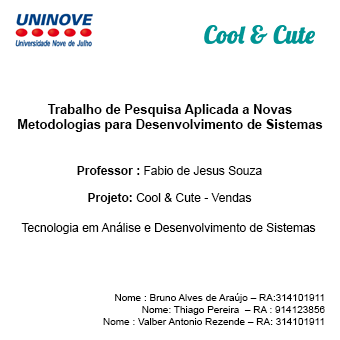
<style>
.page{position:relative;width:340px;height:340px;background:#ffffff}
.page>*{position:absolute;margin:0}
.t1{font:13px "Arial-BoldMT";color:#000000}
.t2{font:12px "ArialMT";color:#000000}
.t3{font:12px "Arial-BoldMT";color:#000000}
.t4{font:10px "ArialMT";color:#000000}
</style>
<div class="page">
<p class="t1" style="left:18px;top:104px;width:305px;height:28px;text-align:center">Trabalho de Pesquisa Aplicada a Novas Metodologias para Desenvolvimento de Sistemas</p>
<p class="t2" style="left:77px;top:166px;width:185px;height:9px"><span class="t3">Professor : </span>Fabio de Jesus Souza</p>
<p class="t2" style="left:88px;top:193px;width:164px;height:11px"><span class="t3">Projeto: </span>Cool &amp; Cute - Vendas</p>
<p class="t2" style="left:21px;top:222px;width:295px;height:12px">Tecnologia em Análise e Desenvolvimento de Sistemas</p>
<p class="t4" style="left:103px;top:293px;width:222px;height:32px;text-align:right">Nome : Bruno Alves de Araújo – RA:314101911 <br>Nome: Thiago Pereira  – RA : 914123856<br>Nome : Valber Antonio Rezende – RA: 314101911</p>
</div>
